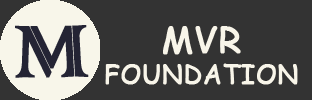
<style>
.page{position:relative;width:312px;height:100px;background:#333333}
.page>*{position:absolute;margin:0}
.t1{font:96.9px "ColonnaMT";color:#242434;font-weight:bold}
.t2{font:26px "ComicSansMS";color:#f8f5e9;font-weight:bold}
.t3{font:36px "ComicSansMS";color:#f8f5e9;font-weight:bold}
</style>
<div class="page">
<p class="t1" style="left:15px;top:25px;width:74px;height:53px;rotate:-1deg">M</p>
<p class="t2" style="left:105px;top:26px;width:193px;height:59px;text-align:center"><span class="t3">MVR<br></span>FOUNDATION</p>
</div>
